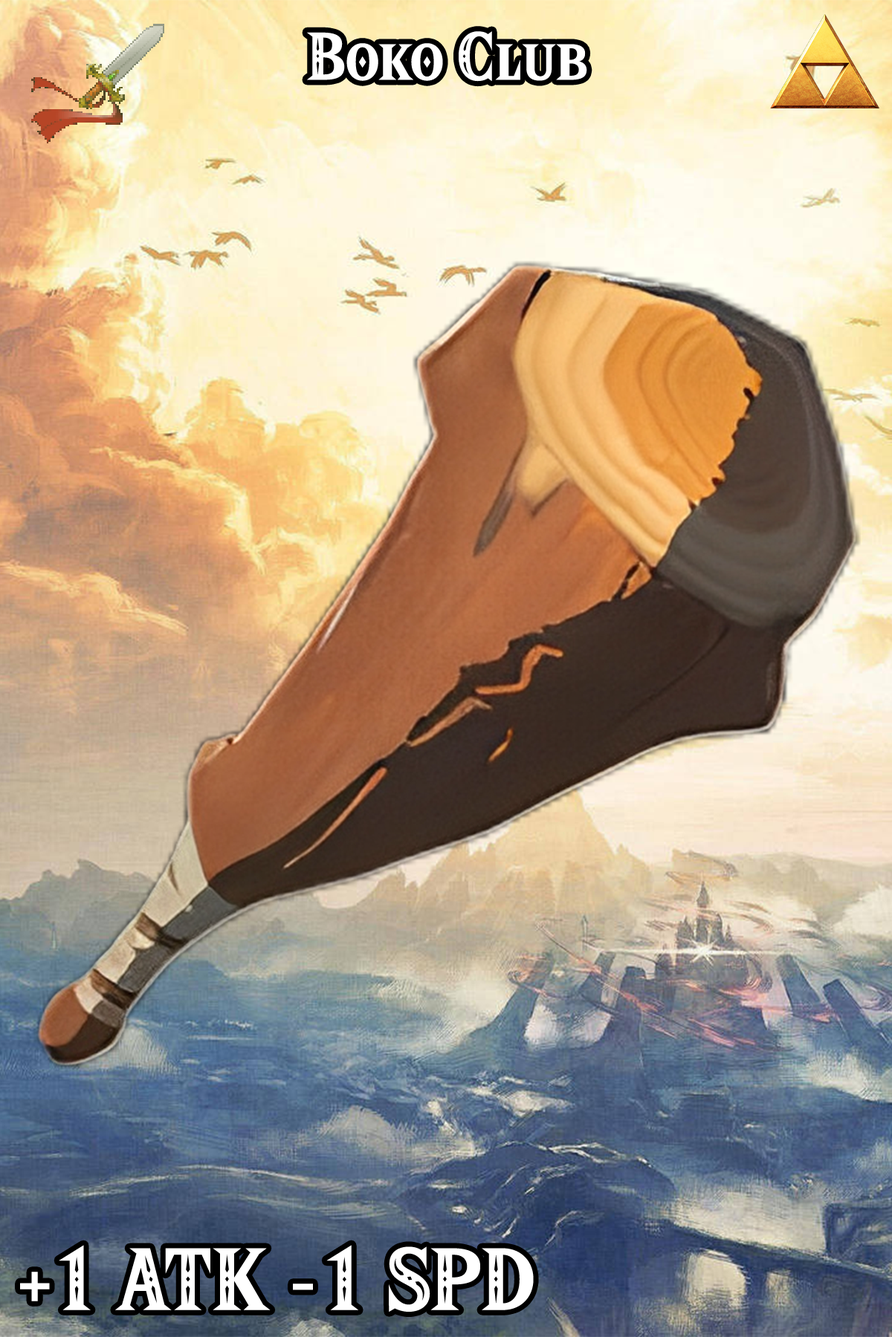
<style>
.page{position:relative;width:892px;height:1337px}
.page>*{position:absolute;margin:0}
.t1{font:101px "HyliaSerifBeta-Regular";color:#ffffff}
.t2{font:132.3px "HyliaSerifBeta-Regular";color:#ffffff}
</style>
<div class="page">
<p class="t1" style="left:307px;top:31px;width:280px;height:51px">Boko Club</p>
<p class="t2" style="left:20px;top:1245px;width:513px;height:67px">+1 ATK -1 SPD</p>
</div>
